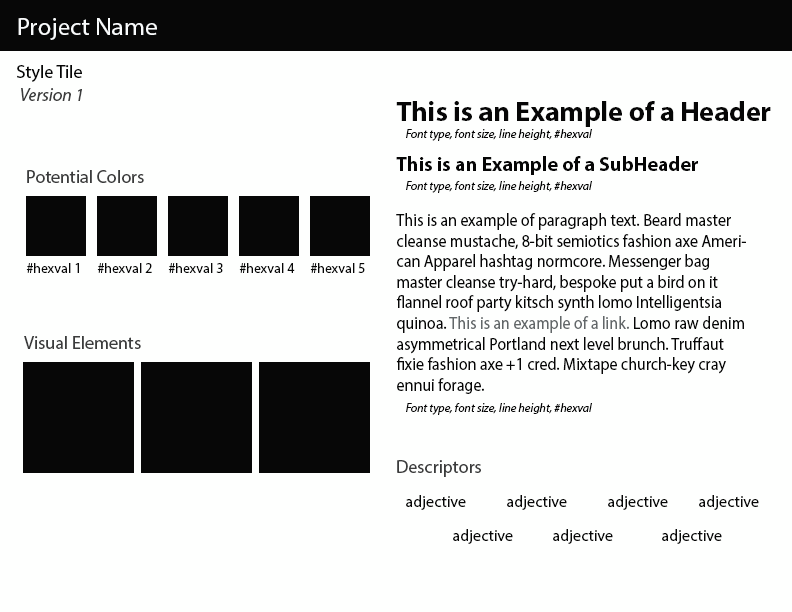
<style>
.page{position:relative;width:792px;height:612px;background:#fefffe}
.page>*{position:absolute;margin:0}
.t1{font:24.9px "MyriadPro-Regular";color:#f9fbfc}
.t2{font:18px "MyriadPro-Regular";color:#060606}
.t3{font:18px "MyriadPro-It";color:#3b3c3c}
.t4{font:28px "MyriadPro-Bold";color:#060606}
.t5{font:12px "MyriadPro-It";color:#060606}
.t6{font:20px "MyriadPro-Bold";color:#060606}
.t7{font:18px "MyriadPro-Regular";color:#3b3c3c}
.t8{font:17.1px "MyriadPro-Regular";color:#060606;scale:0.93 1}
.t9{font:17.1px "MyriadPro-Regular";color:#626769;scale:0.93 1}
.t10{font:14px "MyriadPro-Regular";color:#070707}
.t11{font:16px "MyriadPro-Regular";color:#070707}
</style>
<div class="page">
<p class="t1" style="left:18px;top:18px;width:139px;height:22px">Project Name</p>
<p class="t2" style="left:17px;top:65px;width:65px;height:17px">Style Tile</p>
<p class="t3" style="left:21px;top:88px;width:61px;height:13px">Version 1</p>
<p class="t4" style="left:396px;top:101px;width:375px;height:26px">This is an Example of a Header</p>
<p class="t5" style="left:406px;top:129px;width:186px;height:12px">Font type, font size, line height, #hexval</p>
<p class="t6" style="left:396px;top:156px;width:302px;height:19px">This is an Example of a SubHeader</p>
<p class="t7" style="left:27px;top:170px;width:117px;height:13px">Potential Colors</p>
<p class="t5" style="left:406px;top:181px;width:186px;height:12px">Font type, font size, line height, #hexval</p>
<p class="t8" style="left:396px;top:213px;width:350px;height:181px">This is an example of paragraph text. Beard master cleanse mustache, 8-bit semiotics fashion axe American Apparel hashtag normcore. Messenger bag master cleanse try-hard, bespoke put a bird on it flannel roof party kitsch synth lomo Intelligentsia quinoa. <span class="t9">This is an example of a link. </span>Lomo raw denim asymmetrical Portland next level brunch. Truffaut fixie fashion axe +1 cred. Mixtape church-key cray ennui forage.</p>
<p class="t10" style="left:26px;top:263px;width:53px;height:10px">#hexval 1</p>
<p class="t10" style="left:97px;top:263px;width:55px;height:10px">#hexval 2</p>
<p class="t10" style="left:168px;top:263px;width:55px;height:10px">#hexval 3</p>
<p class="t10" style="left:239px;top:263px;width:56px;height:10px">#hexval 4</p>
<p class="t10" style="left:310px;top:263px;width:55px;height:10px">#hexval 5</p>
<p class="t7" style="left:24px;top:336px;width:117px;height:13px">Visual Elements</p>
<p class="t5" style="left:406px;top:403px;width:186px;height:12px">Font type, font size, line height, #hexval</p>
<p class="t7" style="left:397px;top:460px;width:84px;height:17px">Descriptors</p>
<p class="t11" style="left:406px;top:495px;width:60px;height:15px">adjective</p>
<p class="t11" style="left:507px;top:495px;width:60px;height:15px">adjective</p>
<p class="t11" style="left:608px;top:495px;width:60px;height:15px">adjective</p>
<p class="t11" style="left:699px;top:495px;width:60px;height:15px">adjective</p>
<p class="t11" style="left:453px;top:529px;width:60px;height:15px">adjective</p>
<p class="t11" style="left:553px;top:529px;width:60px;height:15px">adjective</p>
<p class="t11" style="left:662px;top:529px;width:60px;height:15px">adjective</p>
</div>
